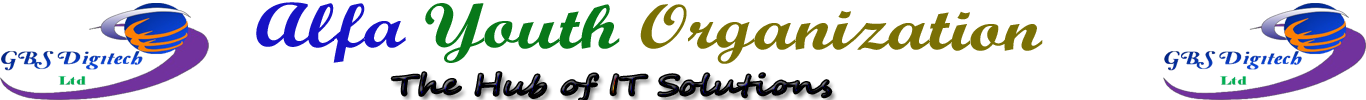
<style>
.page{position:relative;width:1366px;height:100px;background:#ffffff}
.page>*{position:absolute;margin:0}
.t1{font:62.9px "ScriptMTBold";color:#7a7004;scale:1.24 1}
.t2{font:62.9px "ScriptMTBold";color:#1712c4;scale:1.24 1}
.t3{font:62.9px "ScriptMTBold";color:#087819;scale:1.24 1}
.t4{font:27.3px "SegoeScript";scale:1.29 1}
</style>
<div class="page">
<p class="t1" style="left:256px;top:2px;width:787px;height:62px"><span class="t2">Alfa </span><span class="t3">Youth </span>Organization</p>
<p class="t4" style="left:392px;top:72px;width:439px;height:30px">The Hub of IT Solutions</p>
</div>
